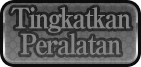
<style>
.page{position:relative;width:141px;height:67px}
.page>*{position:absolute;margin:0}
.t1{font:28px/26px "RyuminPro-ExBold";letter-spacing:-0.08em;color:#878685;scale:0.9 1}
</style>
<div class="page">
<p class="t1" style="left:11px;top:7px;width:120px;height:48px;text-align:center">Tingkatkan<br>Peralatan</p>
</div>
